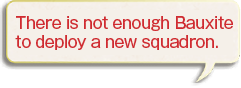
<style>
.page{position:relative;width:241px;height:88px;background:#f5f0e9}
.page>*{position:absolute;margin:0}
.t1{font:16px "GothicMB101Pro-Medium";letter-spacing:-0.02em;color:#d02b31;scale:0.9 1}
</style>
<div class="page">
<p class="t1" style="left:15px;top:16px;width:218px;height:34px">There is not enough Bauxite<br>to deploy a new squadron.</p>
</div>
